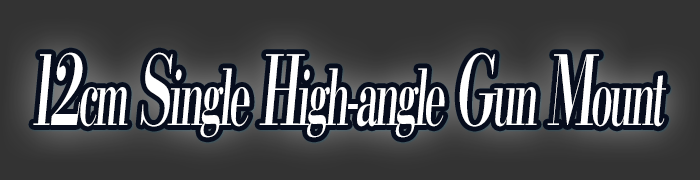
<style>
.page{position:relative;width:700px;height:180px;background:#333333}
.page>*{position:absolute;margin:0}
.t1{font:76.8px "KochoStd-Heavy";letter-spacing:-0.08em;color:#ffffff;font-style:italic;scale:0.52 1}
.t2{font:96px "KochoStd-Heavy";letter-spacing:-0.08em;color:#ffffff;font-style:italic;scale:0.52 1}
</style>
<div class="page">
<p class="t1" style="left:33px;top:52px;width:633px;height:86px"><span class="t2">12</span>cm<span class="t2"> S</span>ingle<span class="t2"> H</span>igh-angle<span class="t2"> G</span>un<span class="t2"> M</span>ount</p>
</div>
